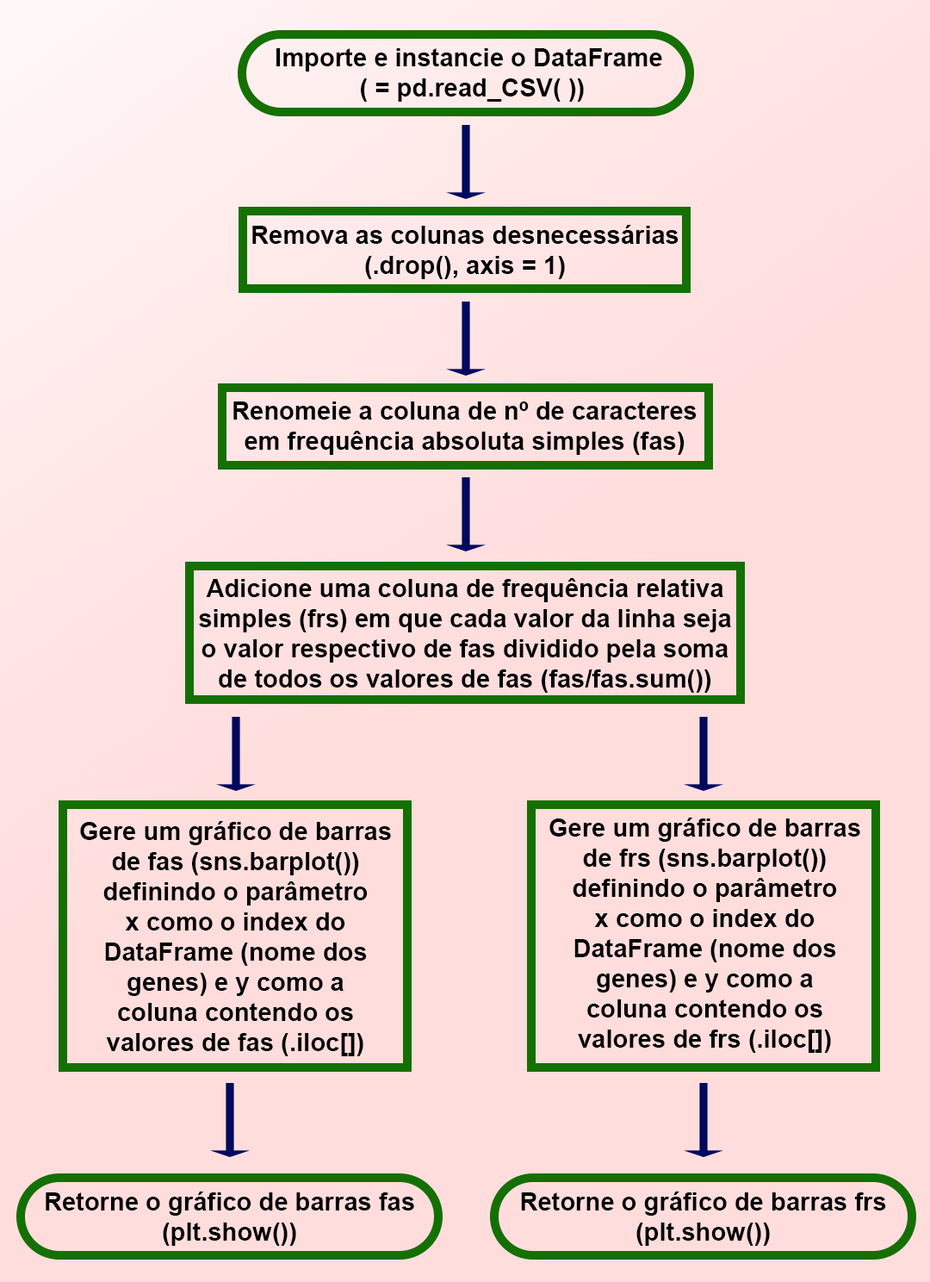
<style>
.page{position:relative;width:930px;height:1282px;background:#ffdddd}
.page>*{position:absolute;margin:0}
.t1{font:25.1px "Arial-BoldMT";color:#000000}
</style>
<div class="page">
<p class="t1" style="left:277px;top:48px;width:385px;height:54px;text-align:center">Importe e instancie o DataFrame<br> ( = pd.read_CSV( ))</p>
<p class="t1" style="left:252px;top:225px;width:427px;height:54px;text-align:center">Remova as colunas desnecessárias<br>(.drop(), axis = 1)</p>
<p class="t1" style="left:233px;top:401px;width:464px;height:54px;text-align:center">Renomeie a coluna de nº de caracteres<br>em frequência absoluta simples (fas)</p>
<p class="t1" style="left:199px;top:578px;width:532px;height:115px;text-align:center">Adicione uma coluna de frequência relativa<br>simples (frs) em que cada valor da linha seja<br>o valor respectivo de fas dividido pela soma<br>de todos os valores de fas (fas/fas.sum())</p>
<p class="t1" style="left:80px;top:821px;width:311px;height:235px;text-align:center">Gere um gráfico de barras<br>de fas (sns.barplot())<br>definindo o parâmetro<br>x como o index do<br>DataFrame (nome dos<br>genes) e y como a<br>coluna contendo os<br>valores de fas (.iloc[])</p>
<p class="t1" style="left:550px;top:817px;width:311px;height:236px;text-align:center">Gere um gráfico de barras<br>de frs (sns.barplot())<br>definindo o parâmetro<br>x como o index do<br>DataFrame (nome dos<br>genes) e y como a<br>coluna contendo os<br>valores de frs (.iloc[])</p>
<p class="t1" style="left:46px;top:1191px;width:368px;height:55px;text-align:center">Retorne o gráfico de barras fas<br>(plt.show())</p>
<p class="t1" style="left:521px;top:1191px;width:365px;height:55px;text-align:center">Retorne o gráfico de barras frs<br>(plt.show())</p>
</div>
